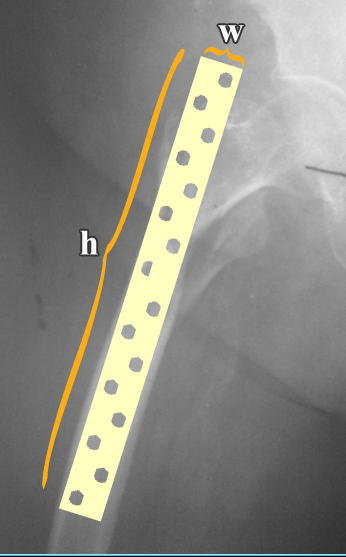
<style>
.page{position:relative;width:346px;height:557px}
.page>*{position:absolute;margin:0}
.t1{font:36px "TimesNewRomanPS-BoldMT";color:#fafafa}
.t2{font:524.2px "TimesNewRomanPS-BoldMT";color:#fbad18;scale:0.14 1}
.t3{font:48px "TimesNewRomanPS-BoldMT";color:#fbad18}
</style>
<div class="page">
<p class="t1" style="left:218px;top:25px;width:26px;height:17px">w</p>
<p class="t2" style="left:42px;top:48px;width:143px;height:442px;rotate:63deg">{</p>
<p class="t3" style="left:203px;top:46px;width:42px;height:22px;rotate:108deg">{</p>
<p class="t1" style="left:80px;top:230px;width:18px;height:25px">h</p>
</div>
